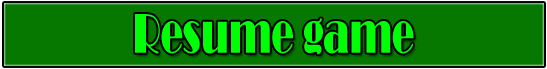
<style>
.page{position:relative;width:547px;height:69px;background:#067800}
.page>*{position:absolute;margin:0}
.t1{font:58.2px "Broadway";color:#00ff06;scale:0.64 1}
</style>
<div class="page">
<p class="t1" style="left:135px;top:14px;width:279px;height:41px">Resume game</p>
</div>
